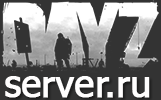
<style>
.page{position:relative;width:161px;height:100px;background:#333333}
.page>*{position:absolute;margin:0}
.t1{font:36.6px "Tahoma";color:#fffefe;font-weight:bold}
</style>
<div class="page">
<p class="t1" style="left:5px;top:76px;width:145px;height:22px">server.ru</p>
</div>
